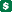
<style>
.page{position:relative;width:12px;height:12px;background:#017745}
.page>*{position:absolute;margin:0}
.t1{font:11px "CooperBlackStd";letter-spacing:-0.01em;color:#ffffff}
</style>
<div class="page">
<p class="t1" style="left:2px;top:2px;width:7px;height:8px">$</p>
</div>
